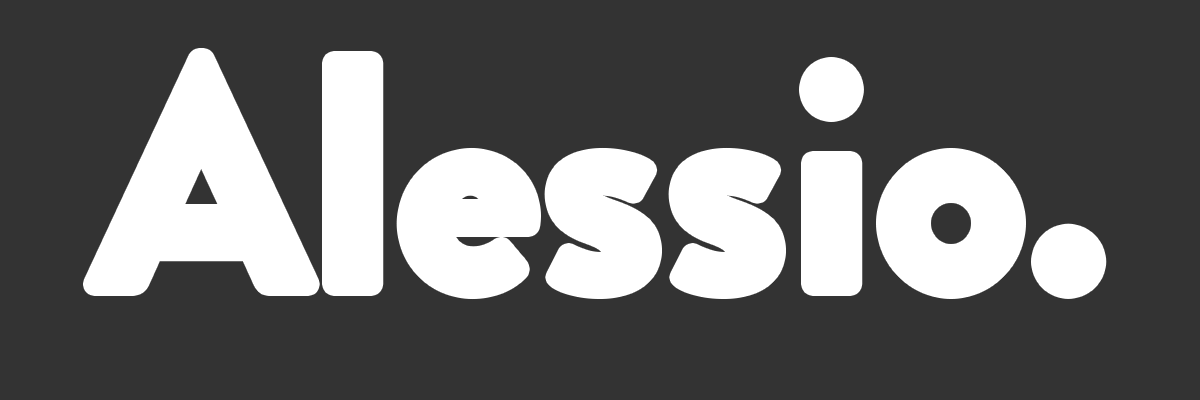
<style>
.page{position:relative;width:1200px;height:400px;background:#333333}
.page>*{position:absolute;margin:0}
.t1{font:333.3px "BrandonGrotesque-Black";color:#ffffff}
</style>
<div class="page">
<p class="t1" style="left:89px;top:54px;width:1012px;height:240px">Alessio.</p>
</div>
